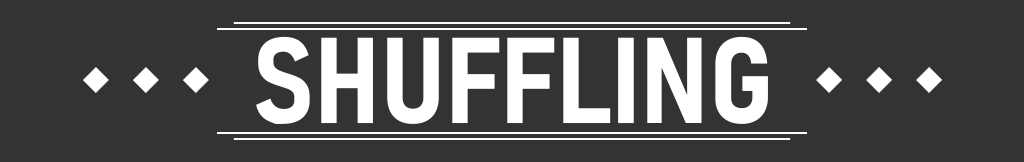
<style>
.page{position:relative;width:1024px;height:162px;background:#333333}
.page>*{position:absolute;margin:0}
.t1{font:120px "Bahnschrift-BoldSemiCondensed";color:#ffffff}
</style>
<div class="page">
<p class="t1" style="left:256px;top:36px;width:512px;height:88px">SHUFFLING</p>
</div>
